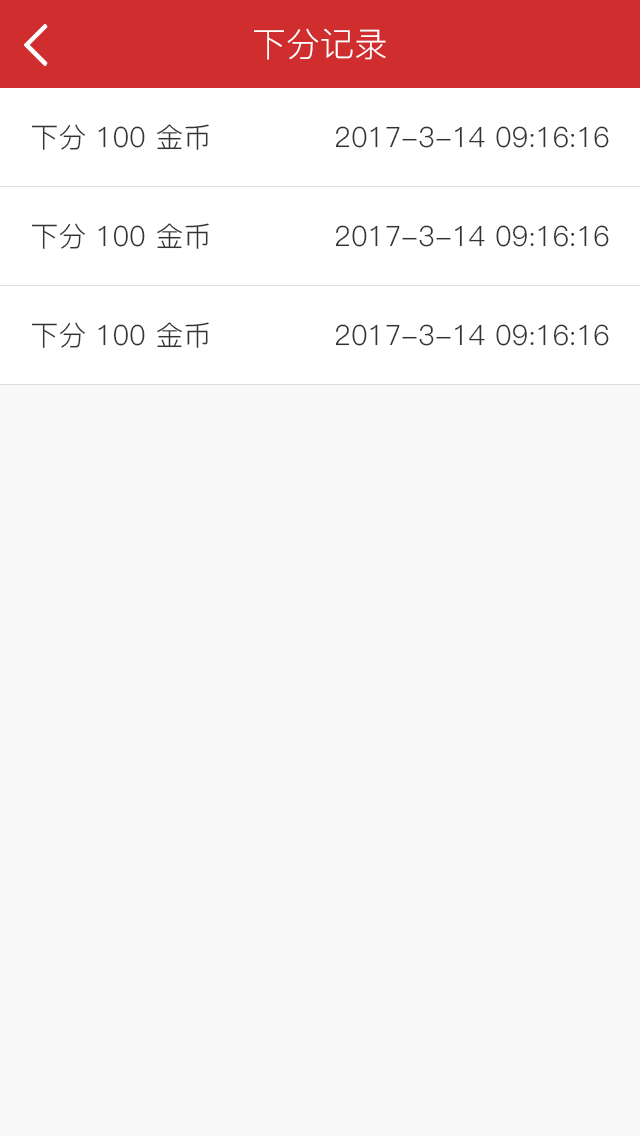
<style>
.page{position:relative;width:640px;height:1136px;background:#f9f9f9}
.page>*{position:absolute;margin:0}
.t1{font:34px "PingFang-SC-Regular";color:#ffffff}
.t2{font:28px "PingFang-SC-Regular";color:#333333}
</style>
<div class="page">
<p class="t1" style="left:254px;top:28px;width:132px;height:32px">下分记录</p>
<p class="t2" style="left:31px;top:124px;width:178px;height:26px">下分 100 金币</p>
<p class="t2" style="left:335px;top:126px;width:274px;height:22px">2017-3-14 09:16:16</p>
<p class="t2" style="left:31px;top:223px;width:178px;height:26px">下分 100 金币</p>
<p class="t2" style="left:335px;top:225px;width:274px;height:22px">2017-3-14 09:16:16</p>
<p class="t2" style="left:31px;top:322px;width:178px;height:26px">下分 100 金币</p>
<p class="t2" style="left:335px;top:324px;width:274px;height:22px">2017-3-14 09:16:16</p>
</div>
